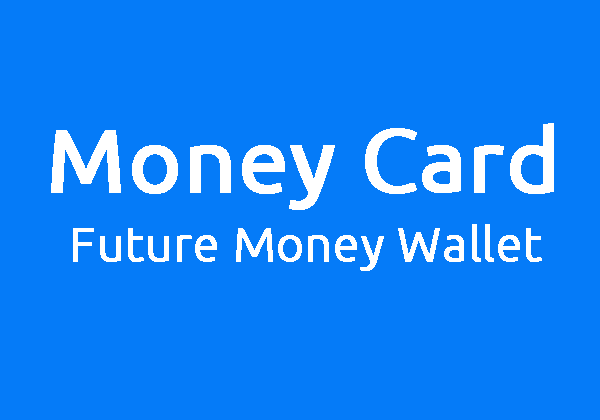
<style>
.page{position:relative;width:600px;height:420px;background:#057bf8}
.page>*{position:absolute;margin:0}
.t1{font:90px "Ubuntu";color:#ffffff;font-weight:bold}
.t2{font:48px "Ubuntu-Light";color:#ffffff;font-weight:bold}
</style>
<div class="page">
<p class="t1" style="left:51px;top:123px;width:503px;height:87px">Money Card</p>
<p class="t2" style="left:73px;top:224px;width:469px;height:47px">Future Money Wallet</p>
</div>
